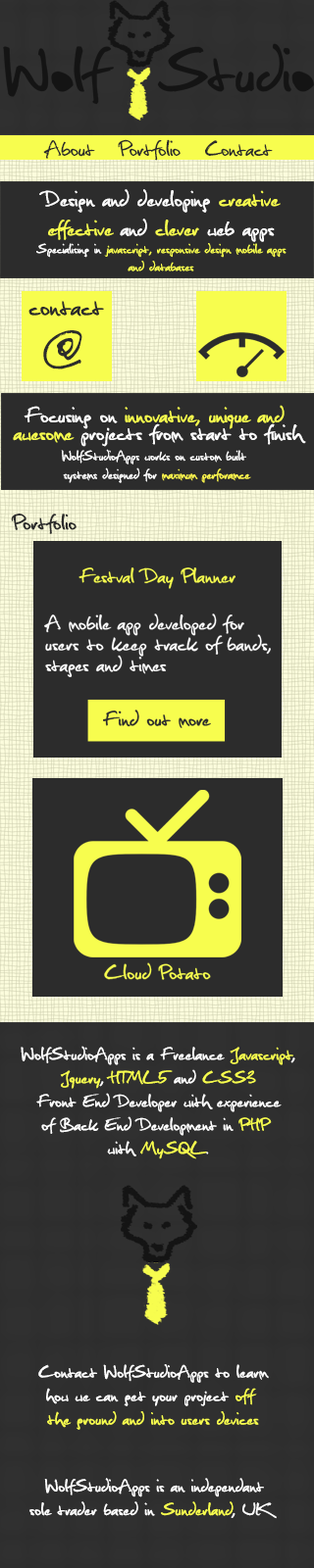
<style>
.page{position:relative;width:314px;height:1568px;background:#2c2c2c}
.page>*{position:absolute;margin:0}
.t1{font:29.4px "Christopherhand";color:#2c2c2c}
.t2{font:17.6px/17.6px "Christopherhand";letter-spacing:0.01em;color:#f7fd4e}
.t3{font:29.4px/29.4px "Christopherhand";letter-spacing:0.01em;color:#ffffff}
.t4{font:29.4px/29.4px "Christopherhand";letter-spacing:0.01em;color:#f7fd4e}
.t5{font:17.6px/17.6px "Christopherhand";letter-spacing:0.01em;color:#ffffff}
.t6{font:35.3px "Christopherhand";letter-spacing:0.01em;color:#2c2c2c}
.t7{font:70.6px "Christopherhand";letter-spacing:0.01em;color:#2c2c2c}
.t8{font:29.4px/17.6px "Christopherhand";letter-spacing:0.01em;color:#f7fd4e}
.t9{font:29.4px/17.6px "Christopherhand";letter-spacing:0.01em;color:#ffffff}
.t10{font:18.5px/18.5px "Christopherhand";letter-spacing:0.01em;color:#ffffff;scale:0.95 1}
.t11{font:18.5px/18.5px "Christopherhand";letter-spacing:0.01em;color:#fdf74e;scale:0.95 1}
.t12{font:29.4px "Christopherhand";letter-spacing:0.01em;color:#2c2c2c}
.t13{font:27.8px "Christopherhand";letter-spacing:0.01em;color:#f7fd4e}
.t14{font:27.8px/20.8px "Christopherhand";letter-spacing:0.01em;color:#ffffff}
.t15{font:27.8px "Christopherhand";letter-spacing:0.01em;color:#2c2c2c}
.t16{font:28px "Christopherhand";letter-spacing:0.01em;color:#f7fd4e}
.t17{font:23.5px/23.5px "Christopherhand";letter-spacing:0.01em;color:#ffffff}
.t18{font:23.5px/23.5px "Christopherhand";letter-spacing:0.01em;color:#f7fd4e}
</style>
<div class="page">
<p class="t1" style="left:43px;top:139px;width:229px;height:22px">About   Portfolio   Contact</p>
<p class="t2" style="left:36px;top:189px;width:250px;height:82px;text-align:center"><span class="t3">Design and developing </span><span class="t4">creative<br>effective </span><span class="t3">and </span><span class="t4">clever </span><span class="t3">web apps<br></span><span class="t5">Specialising in </span>javascript, responsive design mobile apps<br>and databases</p>
<p class="t6" style="left:28px;top:301px;width:76px;height:16px">contact</p>
<p class="t7" style="left:43px;top:330px;width:39px;height:39px">@</p>
<p class="t8" style="left:13px;top:405px;width:293px;height:42px;text-align:center"><span class="t9">Focusing on</span> innovative, unique and <br>awesome <span class="t9">projects from start to finish</span></p>
<p class="t10" style="left:61px;top:449px;width:190px;height:34px;text-align:center">WolfStudioApps works on custom built<br> systems designed for<span class="t11"> maximum perforamce</span></p>
<p class="t12" style="left:11px;top:514px;width:65px;height:20px">Portfolio</p>
<p class="t13" style="left:78px;top:567px;width:157px;height:22px">Festval Day Planner</p>
<p class="t14" style="left:44px;top:613px;width:226px;height:64px">A mobile app developed for <br>users to keep track of bands,<br>stages and times</p>
<p class="t15" style="left:103px;top:710px;width:108px;height:18px">Find out more</p>
<p class="t16" style="left:104px;top:962px;width:107px;height:18px">Cloud Potato</p>
<p class="t17" style="left:21px;top:1046px;width:274px;height:113px;text-align:center">WolfStudioApps is a Freelance <span class="t18">Javascript</span>,<br><span class="t18">Jquery</span>, <span class="t18">HTML5</span> and <span class="t18">CSS3<br></span>Front End Developer with experience<br>of Back End Development in <span class="t18">PHP</span> <br>with <span class="t18">MySQL</span>.</p>
<p class="t17" style="left:38px;top:1364px;width:231px;height:66px;text-align:center">Contact WolfStudioApps to learm<br>how we can get your project <span class="t18">off <br>the ground and into users devices</span></p>
<p class="t17" style="left:29px;top:1478px;width:247px;height:41px;text-align:center">WolfStudioApps is an independant <br>sole trader based in <span class="t18">Sunderland</span>, UK</p>
</div>
